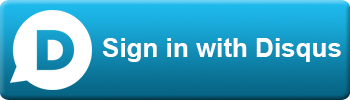
<style>
.page{position:relative;width:350px;height:100px}
.page>*{position:absolute;margin:0}
.t1{font:26px "Arial-BoldMT";color:#ffffff}
</style>
<div class="page">
<p class="t1" style="left:102px;top:38px;width:239px;height:24px">Sign in with Disqus</p>
</div>
